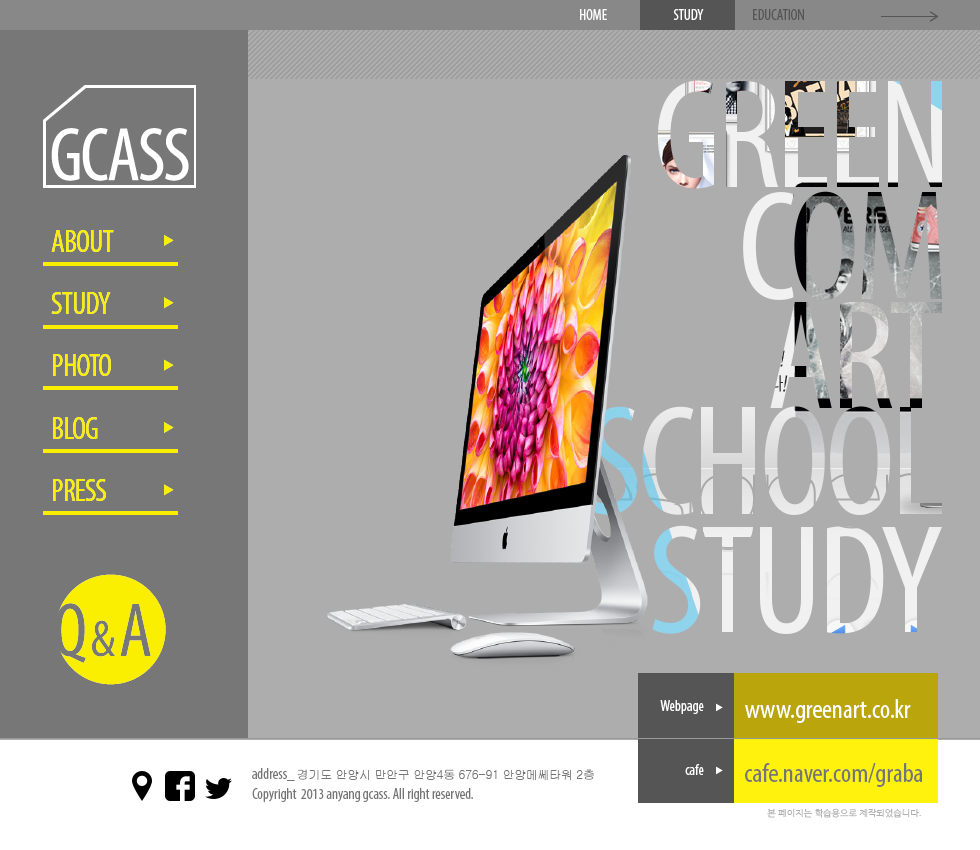
<style>
.page{position:relative;width:980px;height:850px;background:#adadad}
.page>*{position:absolute;margin:0}
.t1{font:15px "MyriadPro-Cond";color:#ffffff}
.t2{font:15px "MyriadPro-Cond";color:#555555}
.t3{font:31.5px "MyriadPro-Cond";letter-spacing:-0.03em;color:#faef00}
.t4{font:27px "MyriadPro-Cond";color:#ffffff}
.t5{font:12px "Gulim";letter-spacing:-0.025em;color:#757575}
.t6{font:15px "MyriadPro-Cond";color:#757575}
.t7{font:27px "MyriadPro-Cond";color:#757575}
.t8{font:9px "NanumGothic";color:#adadad}
</style>
<div class="page">
<p class="t1" style="left:580px;top:9px;width:27px;height:11px">HOME</p>
<p class="t1" style="left:580px;top:9px;width:27px;height:11px">HOME</p>
<p class="t1" style="left:673px;top:9px;width:31px;height:11px">STUDY</p>
<p class="t1" style="left:673px;top:9px;width:31px;height:11px">STUDY</p>
<p class="t2" style="left:753px;top:9px;width:51px;height:11px">EDUCATION</p>
<p class="t2" style="left:753px;top:9px;width:51px;height:11px">EDUCATION</p>
<p class="t3" style="left:51px;top:230px;width:63px;height:22px">ABOUT</p>
<p class="t3" style="left:51px;top:292px;width:60px;height:22px">STUDY</p>
<p class="t3" style="left:53px;top:354px;width:58px;height:22px">PHOTO</p>
<p class="t3" style="left:53px;top:417px;width:45px;height:22px">BLOG</p>
<p class="t3" style="left:53px;top:479px;width:53px;height:22px">PRESS</p>
<p class="t1" style="left:660px;top:700px;width:44px;height:14px">Webpage</p>
<p class="t4" style="left:745px;top:699px;width:166px;height:24px">www.greenart.co.kr</p>
<p class="t5" style="left:252px;top:768px;width:342px;height:13px"><span class="t6">address_ </span>경기도 안양시 만안구 안양4동 676-91 안양메쎄타워 2층</p>
<p class="t1" style="left:685px;top:764px;width:19px;height:11px">cafe</p>
<p class="t7" style="left:745px;top:763px;width:177px;height:24px">cafe.naver.com/graba</p>
<p class="t6" style="left:252px;top:788px;width:221px;height:14px">Copyright  2013 anyang gcass. All right reserved.</p>
<p class="t8" style="left:767px;top:808px;width:154px;height:10px">본 페이지는 학습용으로 제작되었습니다.</p>
</div>
